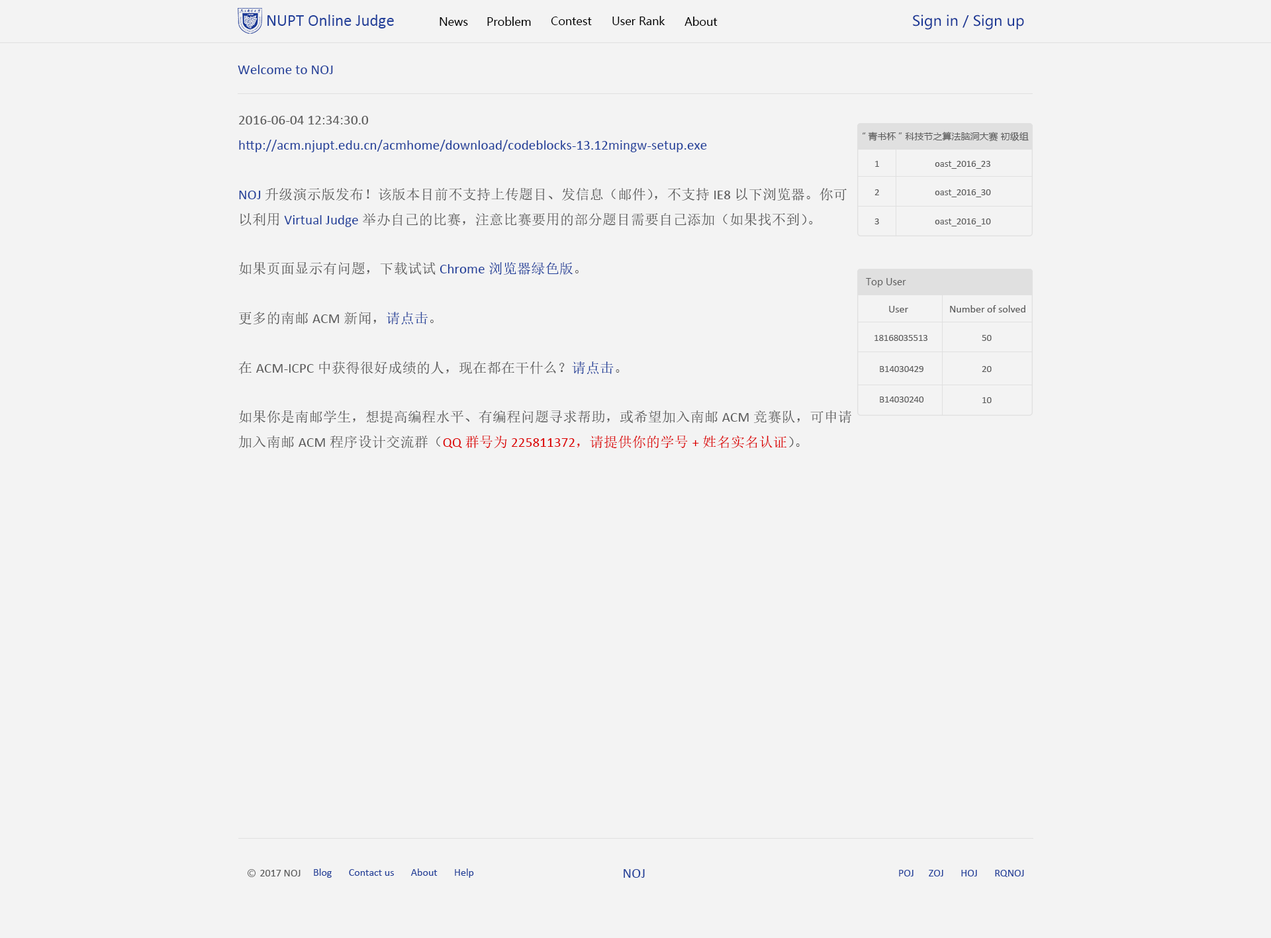
<style>
.page{position:relative;width:1271px;height:938px;background:#f3f3f3}
.page>*{position:absolute;margin:0}
.t1{font:16.6px "Calibri";color:#22409a}
.t2{font:11px "MicrosoftYaHei";color:#000000}
.t3{font:14.1px "MicrosoftYaHei";color:#1a3795}
.t4{font:14.1px "Calibri";color:#22409a}
.t5{font:14.1px "Calibri";color:#5b5b5b}
.t6{font:14.1px "SimSun";color:#5b5b5b}
.t7{font:14.1px "SimSun";color:#22409a}
.t8{font:14.1px "Calibri";color:#dc0000}
.t9{font:14.1px "SimSun";color:#dc0000}
.t10{font:9.3px "MicrosoftYaHei";color:#5b5b5b}
.t11{font:9.7px "Calibri";color:#5b5b5b}
.t12{font:10.6px "Calibri";color:#5b5b5b}
.t13{font:10.6px "Calibri";color:#22409a}
</style>
<div class="page">
<p class="t1" style="left:267px;top:15px;width:127px;height:13px">NUPT Online Judge</p>
<p class="t2" style="left:440px;top:17px;width:28px;height:9px">News</p>
<p class="t2" style="left:487px;top:17px;width:44px;height:9px">Problem</p>
<p class="t2" style="left:551px;top:17px;width:41px;height:8px">Contest</p>
<p class="t2" style="left:612px;top:16px;width:53px;height:9px">User Rank</p>
<p class="t2" style="left:685px;top:17px;width:33px;height:9px">About</p>
<p class="t3" style="left:913px;top:15px;width:111px;height:15px">Sign in / Sign up</p>
<p class="t4" style="left:238px;top:65px;width:95px;height:9px">Welcome to NOJ</p>
<p class="t4" style="left:238px;top:116px;width:613px;height:332px"><span class="t5">2016-06-04 12:34:30.0<br></span>http://acm.njupt.edu.cn/acmhome/download/codeblocks-13.12mingw-setup.exe<br><br>NOJ<span class="t6">升级演示版发布！该版本目前不支持上传题目、发信息（邮件），不支持</span><span class="t5">IE8</span><span class="t6">以下浏览器。你可以利用</span>Virtual Judge<span class="t6">举办自己的比赛，注意比赛要用的部分题目需要自己添加（如果找不到）。<br><br>如果页面显示有问题，下载试试</span>Chrome<span class="t7">浏览器绿色版</span><span class="t6">。<br><br>更多的南邮</span><span class="t5">ACM</span><span class="t6">新闻，</span><span class="t7">请点击</span><span class="t6">。<br><br>在</span><span class="t5">ACM-ICPC</span><span class="t6">中获得很好成绩的人，现在都在干什么？</span><span class="t7">请点击</span><span class="t6">。<br><br>如果你是南邮学生，想提高编程水平、有编程问题寻求帮助，或希望加入南邮</span><span class="t5">ACM</span><span class="t6">竞赛队，可申请加入南邮</span><span class="t5">ACM</span><span class="t6">程序设计交流群（</span><span class="t8">QQ</span><span class="t9">群号为</span><span class="t8">225811372</span><span class="t9">，请提供你的学号</span><span class="t8">+</span><span class="t9">姓名实名认证</span><span class="t6">）。</span></p>
<p class="t10" style="left:862px;top:132px;width:167px;height:10px">“青书杯”科技节之算法脑洞大赛 初级组</p>
<p class="t11" style="left:875px;top:161px;width:4px;height:6px">1</p>
<p class="t11" style="left:935px;top:161px;width:55px;height:8px">oast_2016_23</p>
<p class="t11" style="left:875px;top:189px;width:4px;height:6px">2</p>
<p class="t11" style="left:935px;top:189px;width:56px;height:8px">oast_2016_30</p>
<p class="t11" style="left:875px;top:218px;width:4px;height:6px">3</p>
<p class="t11" style="left:935px;top:218px;width:56px;height:8px">oast_2016_10</p>
<p class="t10" style="left:866px;top:278px;width:40px;height:9px">Top User</p>
<p class="t12" style="left:889px;top:306px;width:19px;height:6px">User</p>
<p class="t12" style="left:950px;top:305px;width:75px;height:7px">Number of solved</p>
<p class="t11" style="left:875px;top:335px;width:53px;height:6px">18168035513</p>
<p class="t11" style="left:982px;top:335px;width:10px;height:6px">50</p>
<p class="t11" style="left:880px;top:366px;width:44px;height:6px">B14030429</p>
<p class="t11" style="left:982px;top:366px;width:10px;height:6px">20</p>
<p class="t11" style="left:880px;top:397px;width:44px;height:6px">B14030240</p>
<p class="t11" style="left:982px;top:397px;width:10px;height:6px">10</p>
<p class="t12" style="left:260px;top:870px;width:41px;height:7px">2017 NOJ</p>
<p class="t13" style="left:314px;top:869px;width:160px;height:9px">Blog       Contact us       About       Help</p>
<p class="t4" style="left:624px;top:869px;width:21px;height:9px">NOJ</p>
<p class="t13" style="left:899px;top:870px;width:125px;height:7px">POJ      ZOJ       HOJ       RQNOJ</p>
</div>
